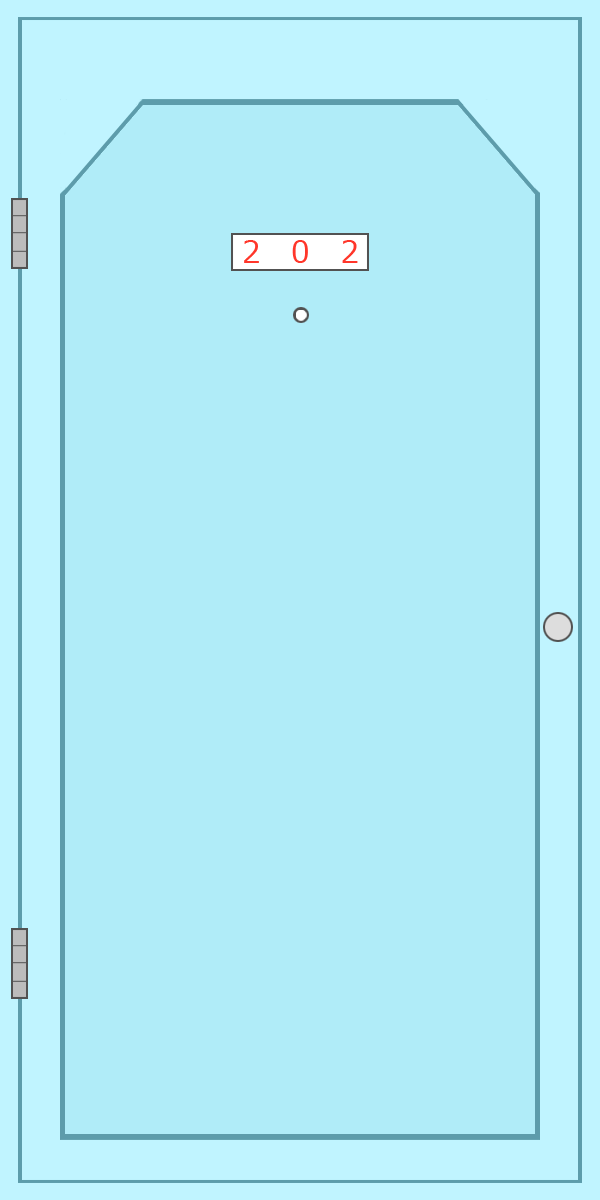
<style>
.page{position:relative;width:600px;height:1200px;background:#b0ecf8}
.page>*{position:absolute;margin:0}
.t1{font:30px "Meiryo";color:#ff362a}
</style>
<div class="page">
<p class="t1" style="left:244px;top:240px;width:114px;height:23px">2   0   2</p>
</div>
